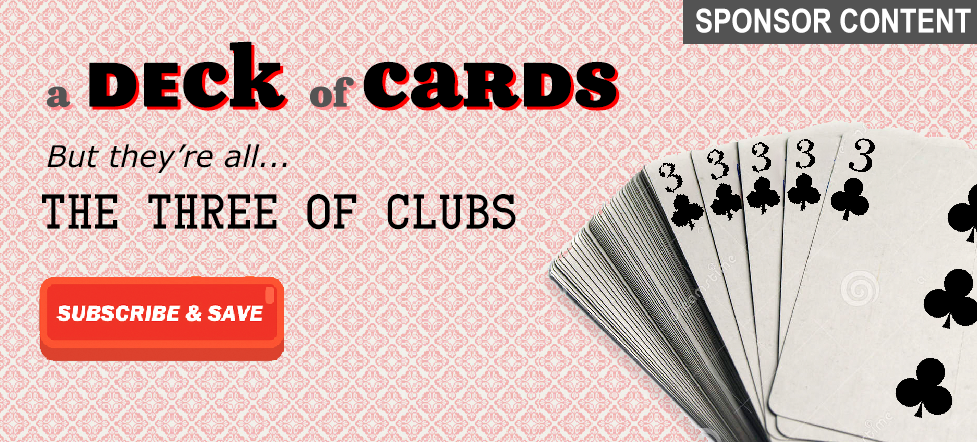
<style>
.page{position:relative;width:977px;height:442px}
.page>*{position:absolute;margin:0}
.t1{font:33.3px "ArialNarrow-Bold";color:#ffffff}
.t2{font:80px "PokerfaceW01-Regular";color:#000000}
.t3{font:36px "PokerfaceW01-Regular";color:#545454}
.t4{font:36px "PokerfaceW01-Regular";color:#000000}
.t5{font:30px "Verdana-Italic";color:#000000}
.t6{font:40.8px "CardCharacters";color:#000000}
</style>
<div class="page">
<p class="t1" style="left:696px;top:8px;width:275px;height:25px">SPONSOR CONTENT</p>
<p class="t2" style="left:46px;top:41px;width:571px;height:67px"><span class="t3">a </span>deck <span class="t3">of </span>cards</p>
<p class="t2" style="left:49px;top:44px;width:571px;height:67px"><span class="t4">a </span>deck <span class="t4">of </span>cards</p>
<p class="t5" style="left:47px;top:144px;width:240px;height:29px">But they’re all...</p>
<p class="t6" style="left:42px;top:194px;width:474px;height:36px">The three OF CLUBS</p>
</div>
